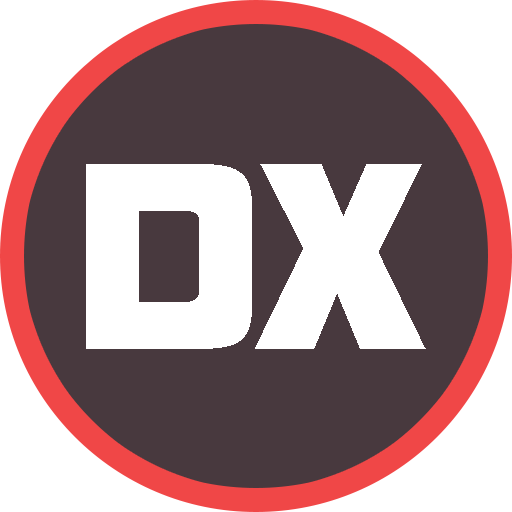
<style>
.page{position:relative;width:512px;height:512px;background:#48393e}
.page>*{position:absolute;margin:0}
.t1{font:280px "VipnagorgiallaCondensed";color:#ffffff}
</style>
<div class="page">
<p class="t1" style="left:86px;top:164px;width:340px;height:185px">DX</p>
</div>
